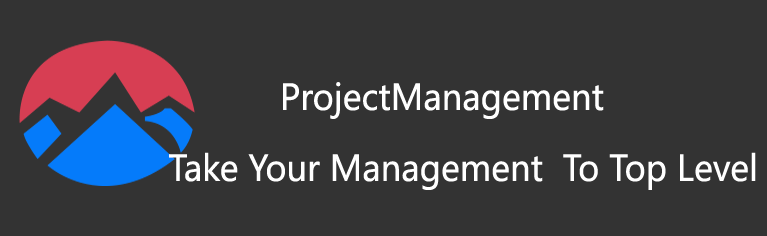
<style>
.page{position:relative;width:767px;height:236px;background:#333333}
.page>*{position:absolute;margin:0}
.t1{font:35.3px "MicrosoftYaHei";color:#ffffff;scale:0.94 1}
</style>
<div class="page">
<p class="t1" style="left:283px;top:82px;width:321px;height:37px">ProjectManagement</p>
<p class="t1" style="left:169px;top:152px;width:587px;height:38px">Take Your Management  To Top Level</p>
</div>
